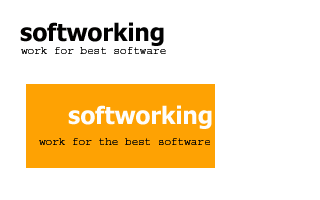
<style>
.page{position:relative;width:320px;height:200px;background:#ffffff}
.page>*{position:absolute;margin:0}
.t1{font:24px "Tahoma-Bold";color:#020100}
.t2{font:24px "Tahoma-Bold";color:#020202}
.t3{font:11px "Courier";color:#020202}
.t4{font:24px "Tahoma-Bold";color:#fdfdfc}
</style>
<div class="page">
<p class="t1" style="left:20px;top:22px;width:144px;height:24px">softwo<span class="t2">rking</span></p>
<p class="t3" style="left:21px;top:47px;width:145px;height:7px">work for best software</p>
<p class="t4" style="left:68px;top:105px;width:144px;height:24px">softworking</p>
<p class="t3" style="left:39px;top:138px;width:171px;height:7px">work for the best software</p>
</div>
